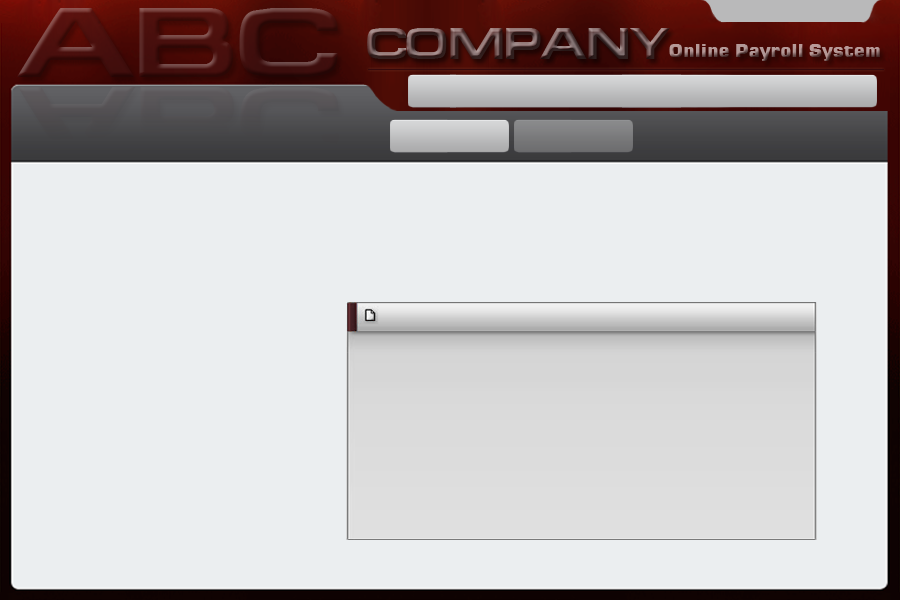
<style>
.page{position:relative;width:900px;height:600px;background:#ebeef0}
.page>*{position:absolute;margin:0}
.t1{font:39.1px "SupertouchRegularSWFTE";scale:0.73 1}
.t2{font:18.3px "Square721BlkNormal"}
</style>
<div class="page">
<p class="t1" style="left:367px;top:28px;width:303px;height:31px">COMPANY</p>
<p class="t2" style="left:669px;top:44px;width:211px;height:17px">Online Payroll System</p>
</div>
